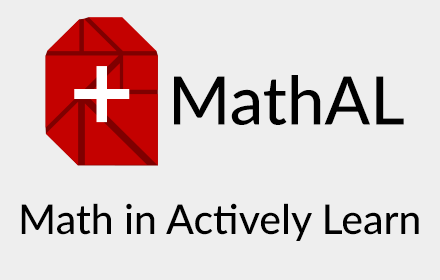
<style>
.page{position:relative;width:440px;height:280px;background:#eeeeee}
.page>*{position:absolute;margin:0}
.t1{font:67px "Lato-Medium";color:#000000}
.t2{font:41px "Lato-Medium";color:#000000}
</style>
<div class="page">
<p class="t1" style="left:174px;top:75px;width:230px;height:50px">MathAL</p>
<p class="t2" style="left:21px;top:203px;width:398px;height:38px">Math in Actively Learn</p>
</div>
